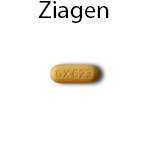
<style>
.page{position:relative;width:148px;height:148px;background:#ffffff}
.page>*{position:absolute;margin:0}
.t1{font:25px "MyriadPro-Regular";color:#000000}
</style>
<div class="page">
<p class="t1" style="left:38px;top:1px;width:71px;height:22px">Ziagen</p>
</div>
